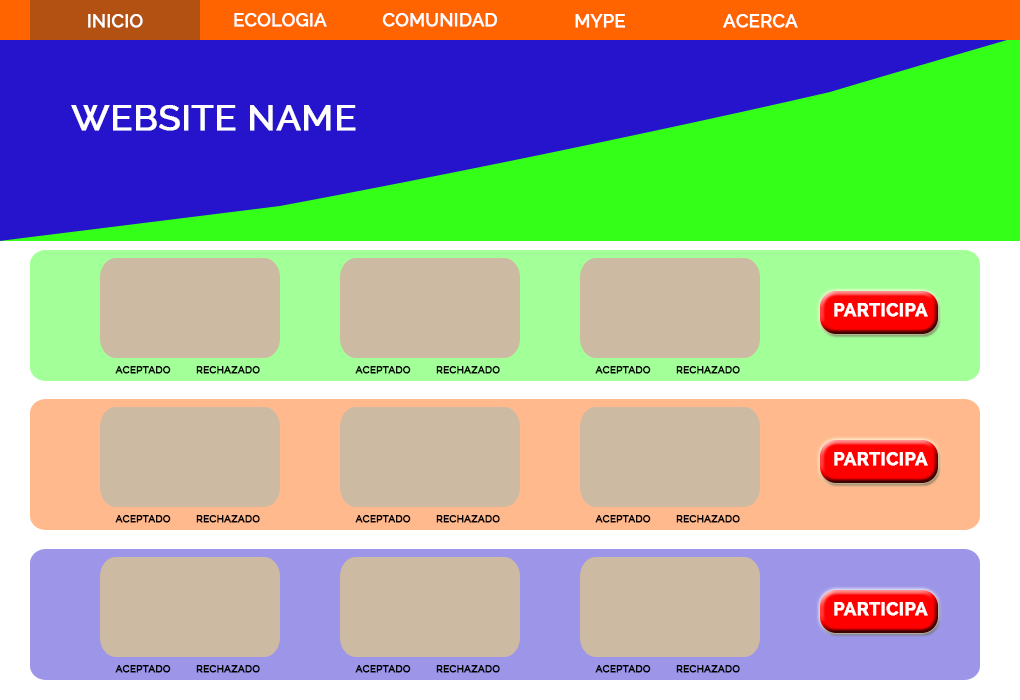
<style>
.page{position:relative;width:1020px;height:700px;background:#ccbba2}
.page>*{position:absolute;margin:0}
.t1{font:18px "Raleway-Medium";color:#ffffff;font-weight:bold}
.t2{font:36px "Raleway-Medium";color:#ffffff;font-weight:bold}
.t3{font:18px "Raleway-Bold";color:#ffffff;font-weight:bold}
.t4{font:10px "Raleway-Medium";color:#000000;font-weight:bold}
</style>
<div class="page">
<p class="t1" style="left:88px;top:14px;width:55px;height:14px">INICIO</p>
<p class="t1" style="left:234px;top:13px;width:93px;height:14px">ECOLOGIA</p>
<p class="t1" style="left:382px;top:13px;width:115px;height:14px">COMUNIDAD</p>
<p class="t1" style="left:575px;top:14px;width:51px;height:14px">MYPE</p>
<p class="t1" style="left:723px;top:14px;width:75px;height:14px">ACERCA</p>
<p class="t2" style="left:71px;top:105px;width:285px;height:26px">WEBSITE NAME</p>
<p class="t3" style="left:834px;top:303px;width:94px;height:14px">PARTICIPA</p>
<p class="t4" style="left:115px;top:366px;width:56px;height:8px">ACEPTADO</p>
<p class="t4" style="left:196px;top:366px;width:64px;height:8px">RECHAZADO</p>
<p class="t4" style="left:355px;top:366px;width:56px;height:8px">ACEPTADO</p>
<p class="t4" style="left:436px;top:366px;width:64px;height:8px">RECHAZADO</p>
<p class="t4" style="left:595px;top:366px;width:56px;height:8px">ACEPTADO</p>
<p class="t4" style="left:676px;top:366px;width:64px;height:8px">RECHAZADO</p>
<p class="t3" style="left:834px;top:452px;width:94px;height:14px">PARTICIPA</p>
<p class="t4" style="left:115px;top:515px;width:56px;height:8px">ACEPTADO</p>
<p class="t4" style="left:196px;top:515px;width:64px;height:8px">RECHAZADO</p>
<p class="t4" style="left:355px;top:515px;width:56px;height:8px">ACEPTADO</p>
<p class="t4" style="left:436px;top:515px;width:64px;height:8px">RECHAZADO</p>
<p class="t4" style="left:595px;top:515px;width:56px;height:8px">ACEPTADO</p>
<p class="t4" style="left:676px;top:515px;width:64px;height:8px">RECHAZADO</p>
<p class="t3" style="left:834px;top:602px;width:94px;height:14px">PARTICIPA</p>
<p class="t4" style="left:115px;top:665px;width:56px;height:8px">ACEPTADO</p>
<p class="t4" style="left:196px;top:665px;width:64px;height:8px">RECHAZADO</p>
<p class="t4" style="left:355px;top:665px;width:56px;height:8px">ACEPTADO</p>
<p class="t4" style="left:436px;top:665px;width:64px;height:8px">RECHAZADO</p>
<p class="t4" style="left:595px;top:665px;width:56px;height:8px">ACEPTADO</p>
<p class="t4" style="left:676px;top:665px;width:64px;height:8px">RECHAZADO</p>
</div>
